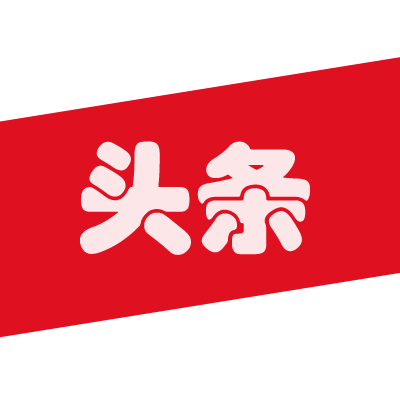
<style>
.page{position:relative;width:400px;height:400px;background:#ffffff}
.page>*{position:absolute;margin:0}
.t1{font:120px "STHupo";color:#fce6e8}
</style>
<div class="page">
<p class="t1" style="left:79px;top:141px;width:231px;height:114px">头条</p>
</div>
